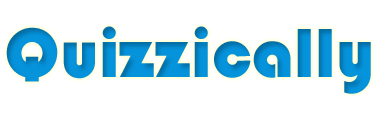
<style>
.page{position:relative;width:384px;height:128px;background:#ffffff}
.page>*{position:absolute;margin:0}
.t1{font:72px "Bauhaus93";color:#0593dc}
</style>
<div class="page">
<p class="t1" style="left:6px;top:26px;width:365px;height:68px">Quizzically</p>
</div>
